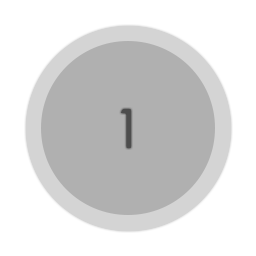
<style>
.page{position:relative;width:256px;height:256px;background:#ffffff}
.page>*{position:absolute;margin:0}
.t1{font:53.9px "CenturyGothic";color:#4d4d4d}
</style>
<div class="page">
<p class="t1" style="left:120px;top:109px;width:11px;height:39px">1</p>
</div>
